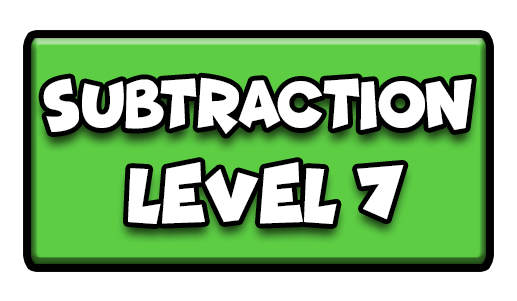
<style>
.page{position:relative;width:517px;height:301px;background:#ffffff}
.page>*{position:absolute;margin:0}
.t1{font:68.8px "Funhouse";color:#ffffff;scale:0.85 1}
.t2{font:77.7px "Funhouse";color:#ffffff;scale:0.95 1}
</style>
<div class="page">
<p class="t1" style="left:43px;top:77px;width:429px;height:57px">SUBTRACTION</p>
<p class="t2" style="left:128px;top:162px;width:276px;height:62px">LEVEL 7</p>
</div>
